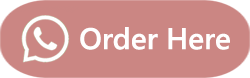
<style>
.page{position:relative;width:250px;height:78px;background:#cb8683}
.page>*{position:absolute;margin:0}
.t1{font:30px "SegoeUI-Semibold";color:#ffffff}
.t2{font:30px "SegoeUI-Bold";color:#ffffff}
</style>
<div class="page">
<p class="t1" style="left:80px;top:27px;width:150px;height:23px"><span class="t2"><br></span>Order Here</p>
</div>
